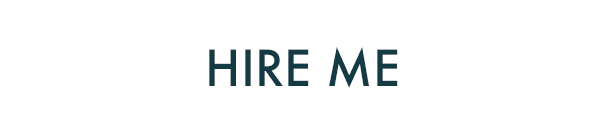
<style>
.page{position:relative;width:600px;height:138px;background:#ffffff}
.page>*{position:absolute;margin:0}
.t1{font:48.4px "Futura-Medium";color:#143a44;text-transform:uppercase}
</style>
<div class="page">
<p class="t1" style="left:209px;top:47px;width:189px;height:41px">Hire Me</p>
</div>
